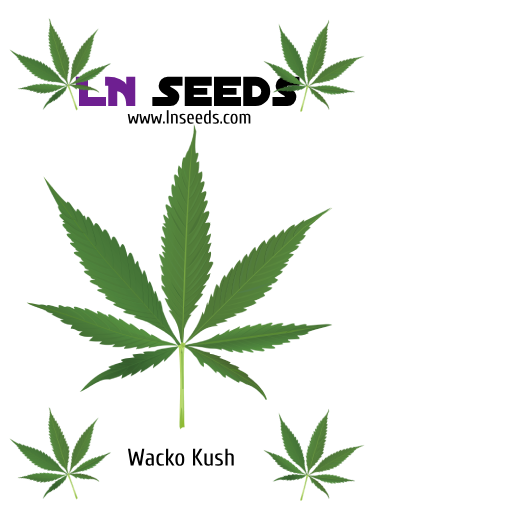
<style>
.page{position:relative;width:512px;height:512px;background:#ffffff}
.page>*{position:absolute;margin:0}
.t1{font:45px "DistantGalaxy";color:#000000}
.t2{font:45px "DistantGalaxy";color:#6e1f91}
.t3{font:19px "Cuprum-Regular";color:#000000}
.t4{font:24px "Cuprum-Regular";color:#000000}
</style>
<div class="page">
<p class="t1" style="left:75px;top:76px;width:225px;height:30px"><span class="t2">LN </span>Seeds</p>
<p class="t3" style="left:127px;top:110px;width:124px;height:14px">www.lnseeds.com</p>
<p class="t4" style="left:127px;top:448px;width:107px;height:18px">Wacko Kush</p>
</div>
